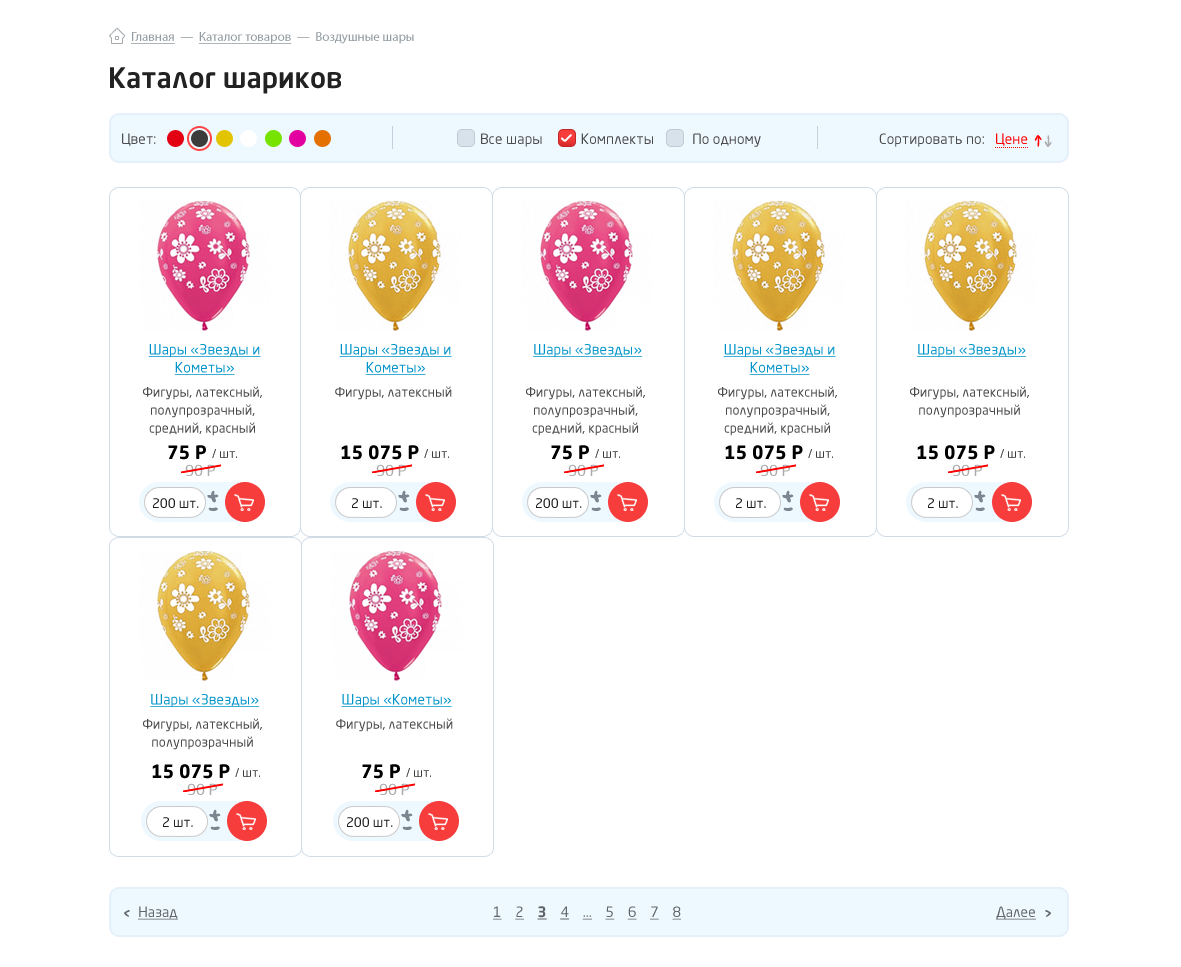
<style>
.page{position:relative;width:1181px;height:967px;background:#ffffff}
.page>*{position:absolute;margin:0}
.t1{font:13px "MyriadPro-Regular";color:#939ca2}
.t2{font:13px "MyriadPro-Regular";color:#939ca2;text-decoration:underline}
.t3{font:28px "NeoSansPro-Medium";color:#222222}
.t4{font:14px "NeoSansPro-Regular";color:#4c4c4c}
.t5{font:14px "NeoSansPro-Regular";color:#ff0000}
.t6{font:14px/18px "NeoSansPro-Regular";color:#0093ca;text-decoration:underline}
.t7{font:14px "NeoSansPro-Regular";color:#0093ca;text-decoration:underline}
.t8{font:13px/18px "NeoSansPro-Regular";color:#494949}
.t9{font:13px "NeoSansPro-Regular";color:#494949}
.t10{font:18px "NeoSansPro-Bold";color:#000000}
.t11{font:12px "NeoSansPro-Regular";color:#393939}
.t12{font:15px "NeoSansPro-Regular";color:#aaaaaa}
.t13{font:19px "JazzBall";color:#798690}
.t14{font:13px "NeoSansPro-Regular";color:#1f1f1f}
.t15{font:30px "JazzBall";color:#798690;font-weight:bold}
.t16{font:14px "NeoSansPro-Regular";color:#60666a;text-decoration:underline}
.t17{font:14px "NeoSansPro-Bold";color:#60666a;text-decoration:underline}
</style>
<div class="page">
<p class="t1" style="left:131px;top:32px;width:283px;height:12px"><span class="t2">Главная</span>  —  <span class="t2">Каталог товаров</span>  —  Воздушные шары</p>
<p class="t3" style="left:110px;top:67px;width:231px;height:27px">Каталог шариков</p>
<p class="t4" style="left:122px;top:133px;width:34px;height:13px">Цвет:</p>
<p class="t4" style="left:481px;top:133px;width:280px;height:14px">Все шары           Комплекты           По одному</p>
<p class="t4" style="left:879px;top:133px;width:149px;height:14px">Сортировать по:   <span class="t5">Цене</span></p>
<p class="t6" style="left:148px;top:344px;width:113px;height:31px;text-align:center">Шары «Звезды и Кометы»</p>
<p class="t6" style="left:339px;top:344px;width:113px;height:31px;text-align:center">Шары «Звезды и Кометы»</p>
<p class="t7" style="left:533px;top:344px;width:109px;height:14px">Шары «Звезды»</p>
<p class="t6" style="left:723px;top:344px;width:113px;height:31px;text-align:center">Шары «Звезды и Кометы»</p>
<p class="t7" style="left:917px;top:344px;width:109px;height:14px">Шары «Звезды»</p>
<p class="t8" style="left:143px;top:386px;width:119px;height:50px;text-align:center">Фигуры, латексный, полупрозрачный, <br>средний, красный</p>
<p class="t9" style="left:335px;top:386px;width:117px;height:14px">Фигуры, латексный</p>
<p class="t8" style="left:526px;top:386px;width:119px;height:50px;text-align:center">Фигуры, латексный, полупрозрачный, <br>средний, красный</p>
<p class="t8" style="left:718px;top:386px;width:119px;height:50px;text-align:center">Фигуры, латексный, полупрозрачный, <br>средний, красный</p>
<p class="t8" style="left:910px;top:386px;width:119px;height:32px;text-align:center">Фигуры, латексный, полупрозрачный</p>
<p class="t10" style="left:168px;top:445px;width:38px;height:15px">75 Р</p>
<p class="t11" style="left:212px;top:449px;width:25px;height:9px">/ шт.</p>
<p class="t10" style="left:341px;top:445px;width:78px;height:15px">15 075 Р</p>
<p class="t11" style="left:424px;top:449px;width:25px;height:9px">/ шт.</p>
<p class="t10" style="left:551px;top:445px;width:38px;height:15px">75 Р</p>
<p class="t11" style="left:595px;top:449px;width:25px;height:9px">/ шт.</p>
<p class="t10" style="left:725px;top:445px;width:78px;height:15px">15 075 Р</p>
<p class="t11" style="left:808px;top:449px;width:25px;height:9px">/ шт.</p>
<p class="t10" style="left:917px;top:445px;width:78px;height:15px">15 075 Р</p>
<p class="t11" style="left:1000px;top:449px;width:25px;height:9px">/ шт.</p>
<p class="t12" style="left:185px;top:464px;width:30px;height:12px">90 Р</p>
<p class="t12" style="left:376px;top:464px;width:30px;height:12px">90 Р</p>
<p class="t12" style="left:568px;top:464px;width:30px;height:12px">90 Р</p>
<p class="t12" style="left:760px;top:464px;width:30px;height:12px">90 Р</p>
<p class="t12" style="left:952px;top:464px;width:30px;height:12px">90 Р</p>
<p class="t13" style="left:207px;top:490px;width:12px;height:13px">+</p>
<p class="t13" style="left:398px;top:490px;width:12px;height:13px">+</p>
<p class="t13" style="left:590px;top:490px;width:12px;height:13px">+</p>
<p class="t13" style="left:782px;top:490px;width:12px;height:13px">+</p>
<p class="t13" style="left:974px;top:490px;width:12px;height:13px">+</p>
<p class="t14" style="left:153px;top:498px;width:46px;height:10px">200 шт.</p>
<p class="t15" style="left:208px;top:507px;width:10px;height:4px">-</p>
<p class="t14" style="left:352px;top:498px;width:30px;height:10px">2 шт.</p>
<p class="t15" style="left:399px;top:507px;width:10px;height:4px">-</p>
<p class="t14" style="left:536px;top:498px;width:46px;height:10px">200 шт.</p>
<p class="t15" style="left:591px;top:507px;width:10px;height:4px">-</p>
<p class="t14" style="left:736px;top:498px;width:30px;height:10px">2 шт.</p>
<p class="t15" style="left:783px;top:507px;width:10px;height:4px">-</p>
<p class="t14" style="left:928px;top:498px;width:30px;height:10px">2 шт.</p>
<p class="t15" style="left:975px;top:507px;width:10px;height:4px">-</p>
<p class="t7" style="left:150px;top:694px;width:109px;height:14px">Шары «Звезды»</p>
<p class="t7" style="left:341px;top:694px;width:111px;height:14px">Шары «Кометы»</p>
<p class="t8" style="left:143px;top:718px;width:119px;height:32px;text-align:center">Фигуры, латексный, полупрозрачный</p>
<p class="t9" style="left:336px;top:718px;width:117px;height:14px">Фигуры, латексный</p>
<p class="t10" style="left:152px;top:764px;width:78px;height:15px">15 075 Р</p>
<p class="t11" style="left:235px;top:768px;width:25px;height:9px">/ шт.</p>
<p class="t10" style="left:362px;top:764px;width:38px;height:15px">75 Р</p>
<p class="t11" style="left:406px;top:768px;width:25px;height:9px">/ шт.</p>
<p class="t12" style="left:187px;top:783px;width:30px;height:12px">90 Р</p>
<p class="t12" style="left:379px;top:783px;width:30px;height:12px">90 Р</p>
<p class="t13" style="left:209px;top:809px;width:12px;height:13px">+</p>
<p class="t13" style="left:401px;top:809px;width:12px;height:13px">+</p>
<p class="t14" style="left:163px;top:817px;width:30px;height:10px">2 шт.</p>
<p class="t14" style="left:347px;top:817px;width:46px;height:10px">200 шт.</p>
<p class="t15" style="left:210px;top:826px;width:10px;height:4px">-</p>
<p class="t15" style="left:402px;top:826px;width:10px;height:4px">-</p>
<p class="t16" style="left:138px;top:906px;width:40px;height:14px">Назад</p>
<p class="t16" style="left:493px;top:906px;width:188px;height:14px">1    2    <span class="t17">3    </span>4    ...    5    6    7    8</p>
<p class="t16" style="left:996px;top:906px;width:40px;height:14px">Далее</p>
</div>
